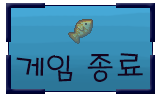
<style>
.page{position:relative;width:160px;height:100px}
.page>*{position:absolute;margin:0}
.t1{font:30px "H2porL";color:#14041e}
</style>
<div class="page">
<p class="t1" style="left:16px;top:53px;width:127px;height:29px">게임 종료</p>
</div>
